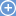
<style>
.page{position:relative;width:16px;height:16px;background:#6797d3}
.page>*{position:absolute;margin:0}
.t1{font:14px "Helvetica";color:#ffffff}
</style>
<div class="page">
<p class="t1" style="left:4px;top:4px;width:8px;height:8px">+</p>
</div>
